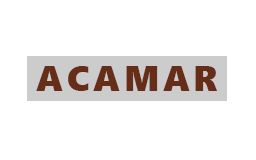
<style>
.page{position:relative;width:256px;height:160px;background:#ffffff}
.page>*{position:absolute;margin:0}
.t1{font:36px "SegoeUIBlack";letter-spacing:0.1em;color:#662d19}
</style>
<div class="page">
<p class="t1" style="left:36px;top:66px;width:181px;height:25px">ACAMAR</p>
</div>
